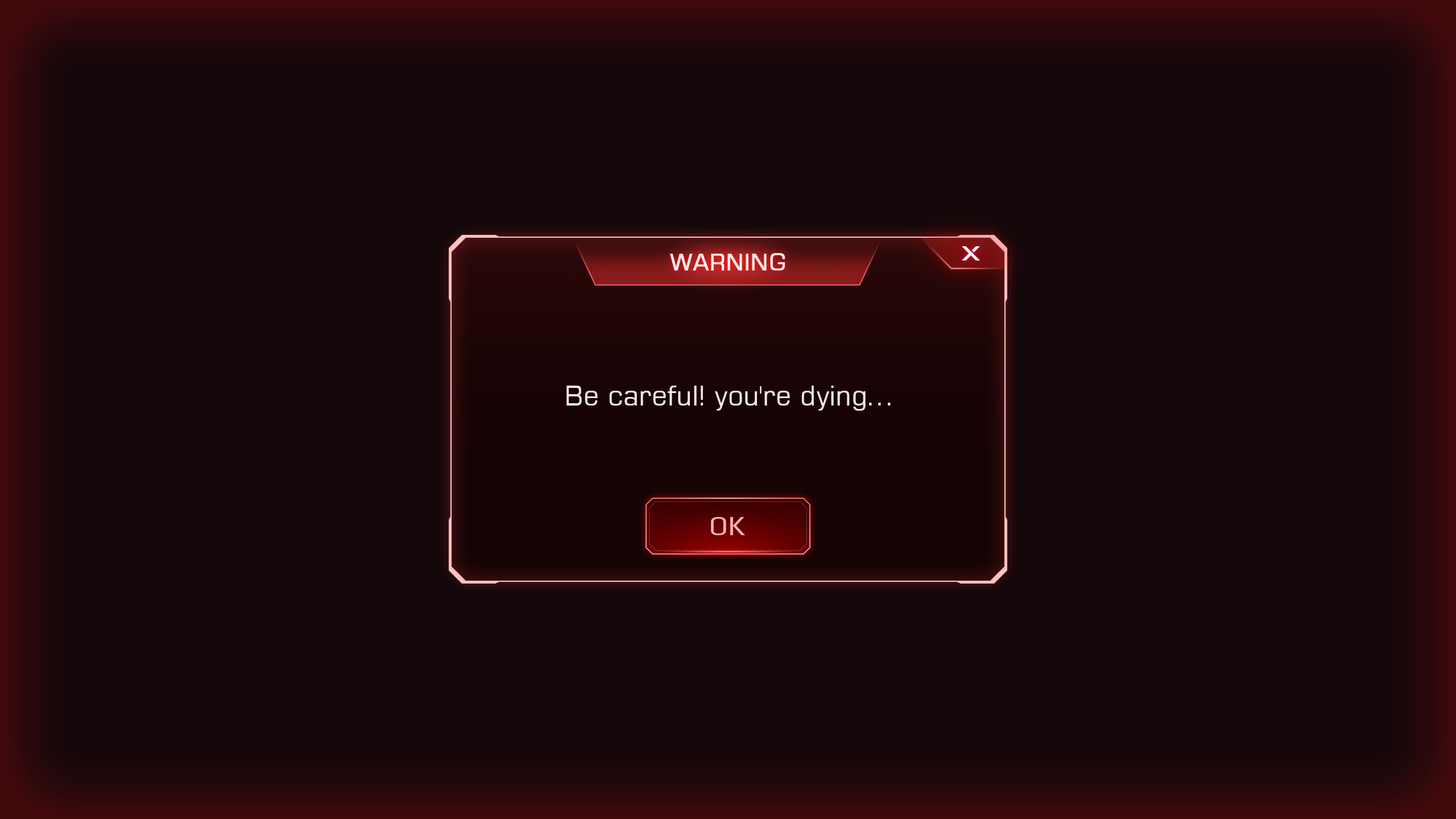
<style>
.page{position:relative;width:1456px;height:819px;background:#14070a}
.page>*{position:absolute;margin:0}
.t1{font:22.7px "Square721BT-Roman";color:#ffebeb;font-weight:bold}
.t2{font:27.3px "Square721BT-Roman";color:#fbe7e7}
.t3{font:27.3px "Play-Regular";color:#ffb2b2}
</style>
<div class="page">
<p class="t1" style="left:670px;top:253px;width:115px;height:18px">WARNING</p>
<p class="t2" style="left:566px;top:386px;width:325px;height:25px">Be careful! you're dying...</p>
<p class="t3" style="left:711px;top:517px;width:34px;height:18px">OK</p>
</div>
